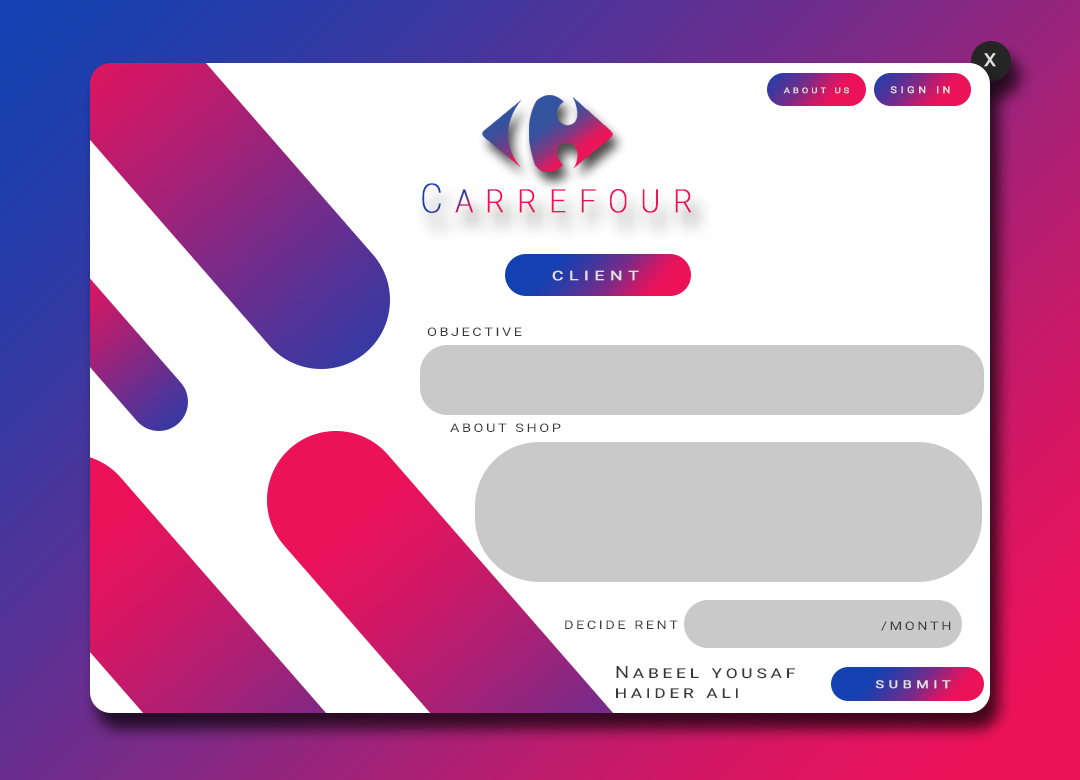
<style>
.page{position:relative;width:1080px;height:780px;background:#ffffff}
.page>*{position:absolute;margin:0}
.t1{font:18px "Roboto-Regular";letter-spacing:0.3em;color:#e0e0e0;font-weight:bold;scale:1.05 1}
.t2{font:7.9px "Roboto-Regular";letter-spacing:0.3em;color:#e0e0e0;text-transform:uppercase;font-weight:bold;scale:1.19 1}
.t3{font:9.4px "Roboto-Regular";letter-spacing:0.3em;color:#e0e0e0;text-transform:uppercase;font-weight:bold;scale:1.17 1}
.t4{font:40px "Roboto-Thin";letter-spacing:0.35em;color:#ec125a;font-variant:small-caps;font-weight:bold;scale:0.85 1}
.t5{font:13px "Roboto-Regular";letter-spacing:0.3em;color:#e0e0e0;text-transform:uppercase;font-weight:bold;scale:1.34 1}
.t6{font:12px "Roboto-Regular";letter-spacing:0.18em;color:#383838;text-transform:uppercase;scale:1.2 1}
.t7{font:16.9px "Roboto-Regular";letter-spacing:0.18em;color:#383838;font-variant:small-caps;scale:1.2 1}
.t8{font:10.7px "Roboto-Regular";letter-spacing:0.3em;color:#e0e0e0;text-transform:uppercase;font-weight:bold;scale:1.34 1}
</style>
<div class="page">
<p class="t1" style="left:984px;top:53px;width:12px;height:14px">X</p>
<p class="t2" style="left:783px;top:87px;width:66px;height:7px">About Us</p>
<p class="t3" style="left:890px;top:86px;width:60px;height:8px">Sign in</p>
<p class="t4" style="left:422px;top:183px;width:269px;height:30px">Carrefour</p>
<p class="t5" style="left:552px;top:270px;width:87px;height:11px">client</p>
<p class="t6" style="left:427px;top:327px;width:95px;height:9px">objective</p>
<p class="t6" style="left:450px;top:423px;width:111px;height:9px">About Shop</p>
<p class="t6" style="left:565px;top:620px;width:113px;height:9px">Decide Rent</p>
<p class="t6" style="left:881px;top:621px;width:70px;height:10px">/month</p>
<p class="t7" style="left:616px;top:666px;width:179px;height:32px">Nabeel yousaf<br>haider ali</p>
<p class="t8" style="left:875px;top:680px;width:76px;height:9px">Submit</p>
</div>
